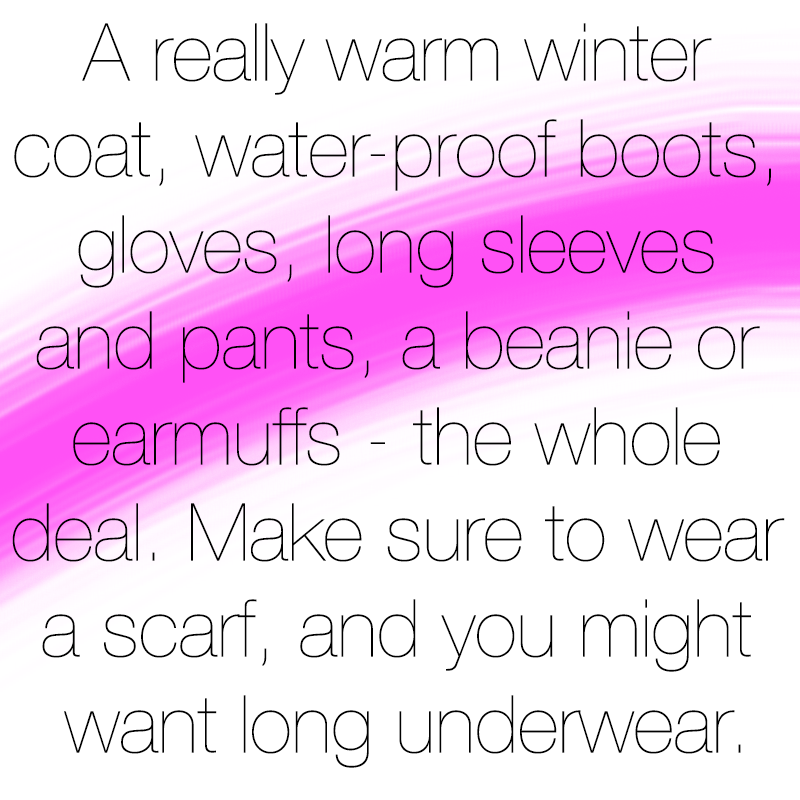
<style>
.page{position:relative;width:800px;height:800px;background:#ffffff}
.page>*{position:absolute;margin:0}
.t1{font:80px "HelveticaNeue-UltraLight";color:#000000}
</style>
<div class="page">
<p class="t1" style="left:12px;top:23px;width:773px;height:745px;text-align:center">A really warm winter <br>coat, water-proof boots, <br>gloves, long sleeves <br>and pants, a beanie or <br>earmuffs - the whole <br>deal. Make sure to wear <br>a scarf, and you might <br>want long underwear.</p>
</div>
